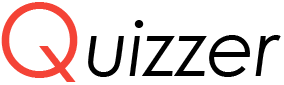
<style>
.page{position:relative;width:284px;height:85px;background:#ffffff}
.page>*{position:absolute;margin:0}
.t1{font:75px "CenturyGothic-Italic";color:#000000}
.t2{font:100px "CenturyGothic";color:#f44336}
</style>
<div class="page">
<p class="t1" style="left:1px;top:2px;width:280px;height:80px"><span class="t2">Q</span>uizzer</p>
</div>
